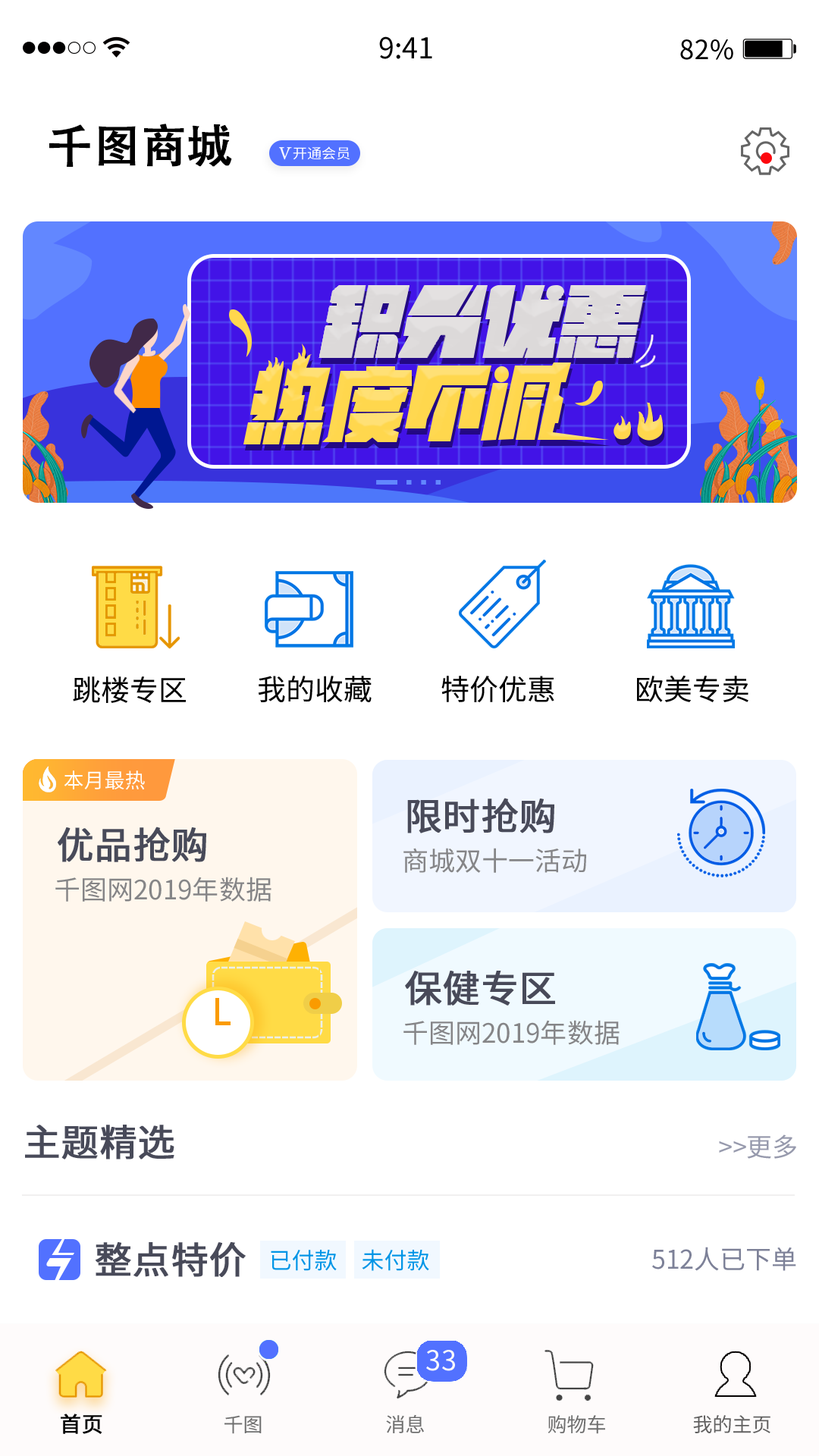
<style>
.page{position:relative;width:819px;height:1456px;background:#ffffff}
.page>*{position:absolute;margin:0}
.t1{font:28.6px "SourceHanSansCN-Regular";color:#000000}
.t2{font:26.4px "SourceHanSansCN-Regular";letter-spacing:0.025em;color:#000000}
.t3{font:45.5px "AdobeHeitiStd-Regular";color:#000000;font-weight:bold}
.t4{font:13.9px "SourceHanSansCN-Regular";color:#ffffff;scale:1.04 1}
.t5{font:28.8px "SourceHanSansCN-Regular";color:#000000}
.t6{font:20.5px "SourceHanSansCN-Regular";color:#ffffff}
.t7{font:37.1px "SourceHanSansCN-Regular";color:#484a59;font-weight:bold}
.t8{font:26.5px "SourceHanSansCN-Regular";color:#858587}
.t9{font:25.8px "SourceHanSansCN-Regular";color:#979aad}
.t10{font:22.7px "SourceHanSansCN-Regular";color:#0095e6}
.t11{font:25.8px "SourceHanSansCN-Regular";color:#7d8198}
.t12{font:27.5px "SourceHanSansCN-Regular";color:#fefbfb}
.t13{font:21.2px "SourceHanSansCN-Regular";color:#000000;font-weight:bold}
.t14{font:19.7px "SourceHanSansCN-Regular";color:#6e6e6e}
.t15{font:19.7px "SourceHanSansCN-Regular";color:#626161}
</style>
<div class="page">
<p class="t1" style="left:379px;top:36px;width:53px;height:23px">9:41</p>
<p class="t2" style="left:680px;top:39px;width:53px;height:21px">82%</p>
<p class="t3" style="left:49px;top:124px;width:183px;height:43px">千图商城</p>
<p class="t4" style="left:293px;top:146px;width:57px;height:14px">开通会员</p>
<p class="t5" style="left:73px;top:676px;width:113px;height:27px">跳楼专区</p>
<p class="t5" style="left:258px;top:676px;width:114px;height:26px">我的收藏</p>
<p class="t5" style="left:441px;top:676px;width:113px;height:27px">特价优惠</p>
<p class="t5" style="left:637px;top:675px;width:111px;height:27px">欧美专卖</p>
<p class="t6" style="left:64px;top:770px;width:81px;height:20px">本月最热</p>
<p class="t7" style="left:407px;top:798px;width:147px;height:35px">限时抢购</p>
<p class="t7" style="left:58px;top:827px;width:148px;height:35px">优品抢购</p>
<p class="t8" style="left:403px;top:848px;width:183px;height:25px">商城双十一活动</p>
<p class="t8" style="left:55px;top:877px;width:216px;height:25px">千图网2019年数据</p>
<p class="t7" style="left:405px;top:971px;width:150px;height:35px">保健专区</p>
<p class="t8" style="left:403px;top:1020px;width:217px;height:25px">千图网2019年数据</p>
<p class="t7" style="left:25px;top:1125px;width:149px;height:34px">主题精选</p>
<p class="t9" style="left:719px;top:1134px;width:77px;height:25px">&gt;&gt;更多</p>
<p class="t7" style="left:96px;top:1242px;width:150px;height:35px">整点特价</p>
<p class="t10" style="left:271px;top:1250px;width:66px;height:21px">已付款</p>
<p class="t10" style="left:362px;top:1249px;width:67px;height:22px">未付款</p>
<p class="t11" style="left:652px;top:1247px;width:144px;height:24px">512人已下单</p>
<p class="t12" style="left:426px;top:1350px;width:29px;height:21px">33</p>
<p class="t13" style="left:61px;top:1414px;width:41px;height:20px">首页</p>
<p class="t14" style="left:224px;top:1415px;width:38px;height:19px">千图</p>
<p class="t14" style="left:386px;top:1414px;width:38px;height:19px">消息</p>
<p class="t14" style="left:548px;top:1415px;width:57px;height:19px">购物车</p>
<p class="t15" style="left:693px;top:1415px;width:77px;height:18px">我的主页</p>
</div>
